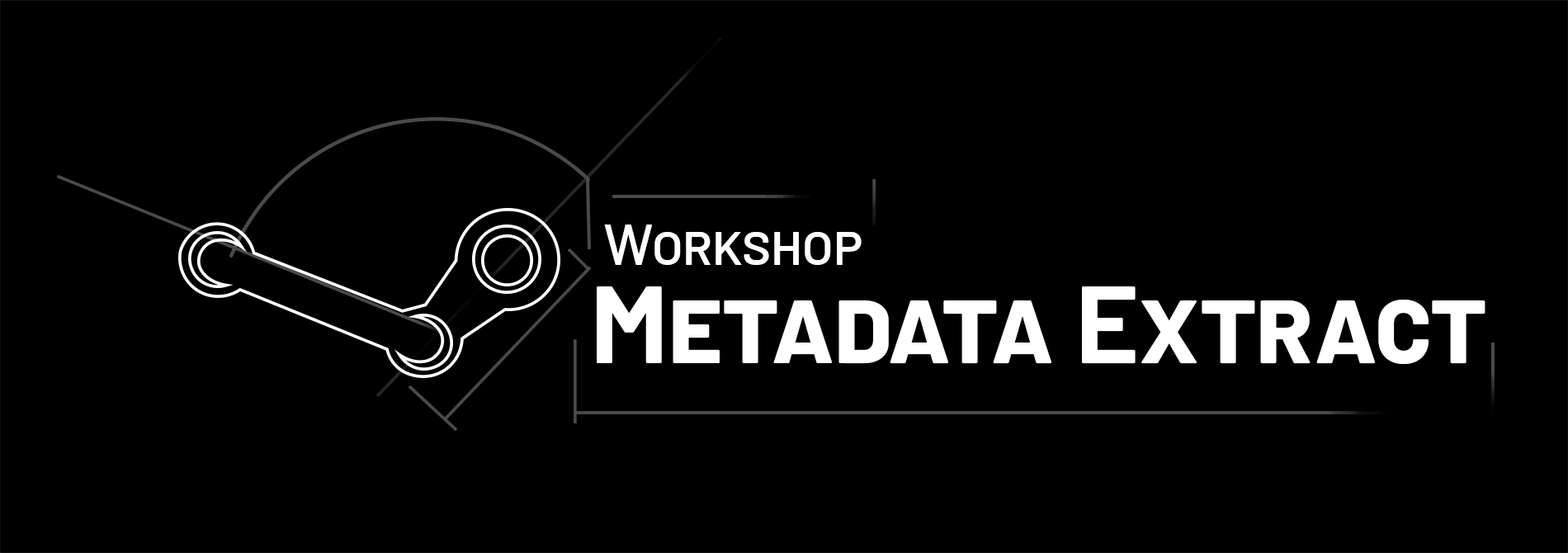
<style>
.page{position:relative;width:1568px;height:553px;background:#000000}
.page>*{position:absolute;margin:0}
.t1{font:57.2px "Barlow-Medium";color:#ffffff;font-variant:small-caps}
.t2{font:109.3px "Barlow-Bold";color:#ffffff;font-variant:small-caps}
</style>
<div class="page">
<p class="t1" style="left:604px;top:224px;width:258px;height:41px">Workshop</p>
<p class="t2" style="left:597px;top:286px;width:888px;height:78px">Metadata Extract</p>
</div>
